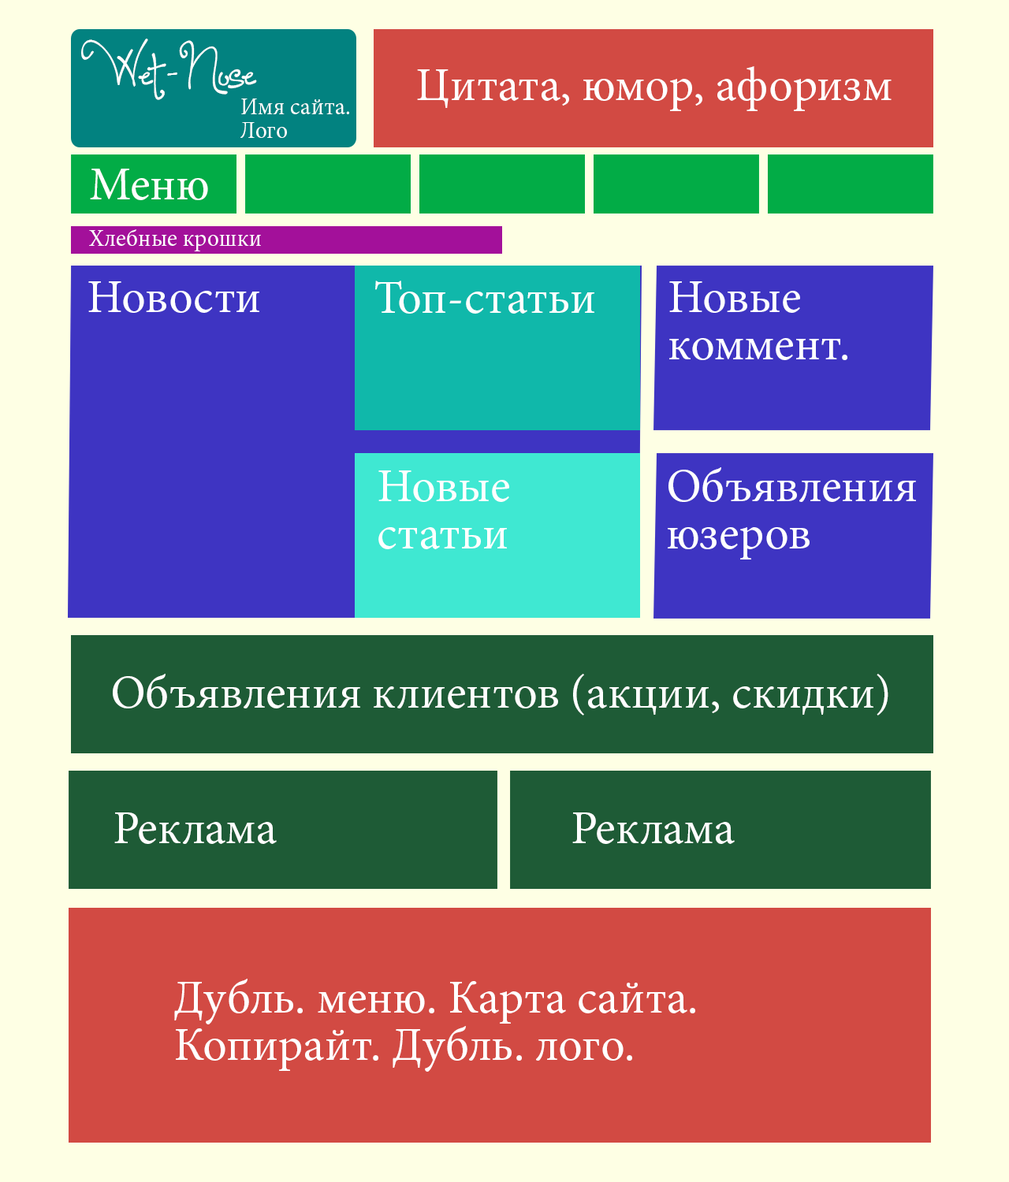
<style>
.page{position:relative;width:1009px;height:1182px;background:#feffe4}
.page>*{position:absolute;margin:0}
.t1{font:78.8px "OneStarryNight";color:#ffffff}
.t2{font:47.3px "MinionPro-Regular";color:#ffffff}
.t3{font:23.6px/23.6px "MinionPro-Regular";color:#ffffff}
.t4{font:23.6px "MinionPro-Regular";color:#ffffff}
.t5{font:47.3px/47.3px "MinionPro-Regular";color:#ffffff}
</style>
<div class="page">
<p class="t1" style="left:81px;top:39px;width:176px;height:61px">Wet-Nose</p>
<p class="t2" style="left:417px;top:66px;width:474px;height:45px">Цитата, юмор, афоризм</p>
<p class="t3" style="left:240px;top:99px;width:109px;height:39px">Имя сайта.<br>Лого</p>
<p class="t2" style="left:90px;top:169px;width:118px;height:31px">Меню</p>
<p class="t4" style="left:89px;top:229px;width:172px;height:22px">Хлебные крошки</p>
<p class="t2" style="left:88px;top:281px;width:171px;height:32px">Новости</p>
<p class="t2" style="left:375px;top:281px;width:219px;height:33px">Топ-статьи</p>
<p class="t5" style="left:669px;top:281px;width:178px;height:79px">Новые <br>коммент.</p>
<p class="t5" style="left:378px;top:470px;width:131px;height:79px">Новые<br>статьи</p>
<p class="t5" style="left:667px;top:467px;width:249px;height:93px">Объявления<br>юзеров</p>
<p class="t2" style="left:113px;top:674px;width:775px;height:42px">Объявления клиентов (акции, скидки)</p>
<p class="t2" style="left:114px;top:813px;width:163px;height:31px">Реклама</p>
<p class="t2" style="left:572px;top:813px;width:162px;height:31px">Реклама</p>
<p class="t5" style="left:174px;top:979px;width:521px;height:93px">Дубль. меню. Карта сайта.<br>Копирайт. Дубль. лого.</p>
</div>
